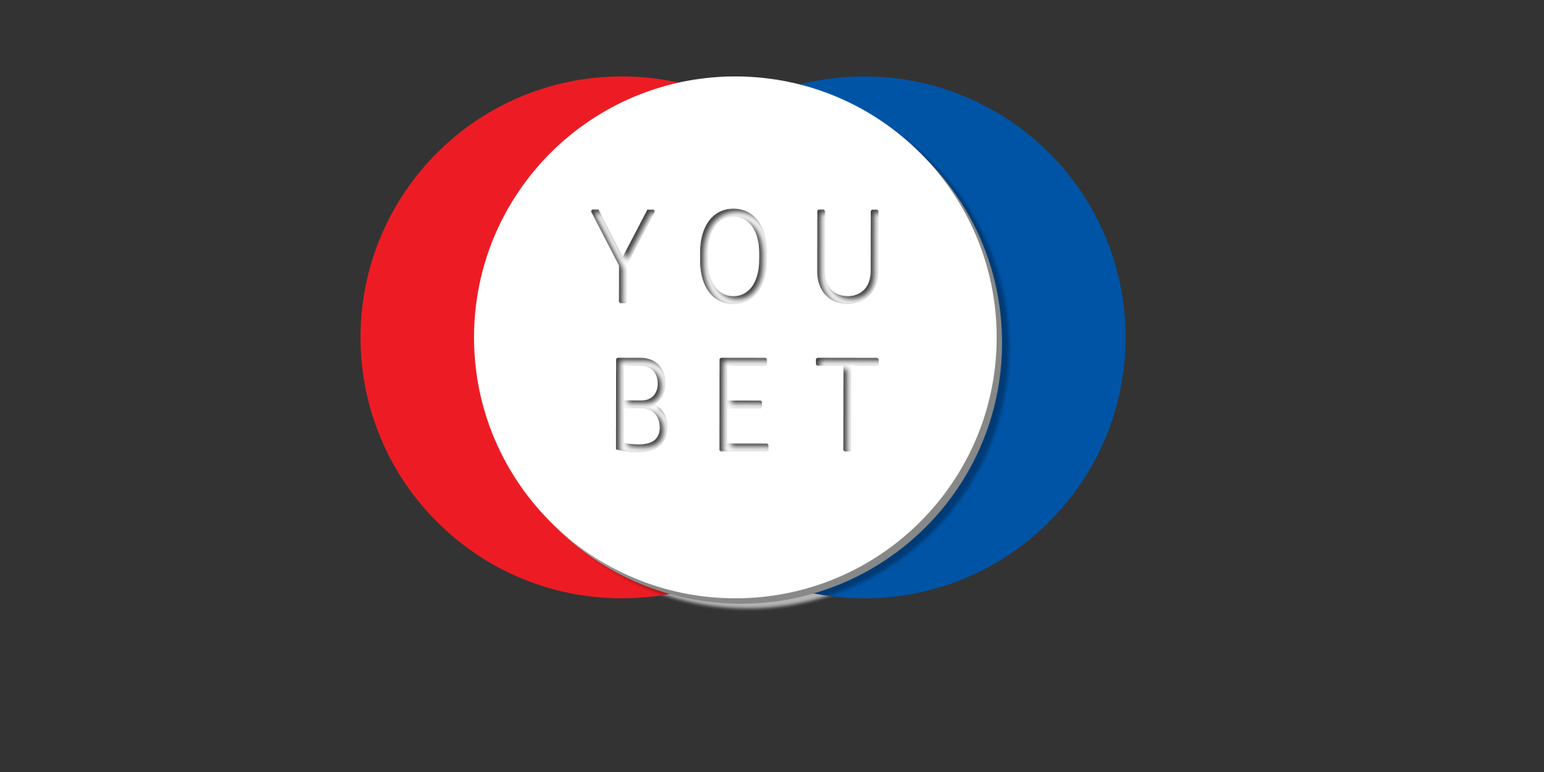
<style>
.page{position:relative;width:1544px;height:772px;background:#333333}
.page>*{position:absolute;margin:0}
.t1{font:128.3px "Quark-Light";font-weight:bold;scale:0.89 1}
</style>
<div class="page">
<p class="t1" style="left:591px;top:208px;width:288px;height:96px">Y O U</p>
<p class="t1" style="left:615px;top:358px;width:264px;height:94px">B E T</p>
</div>
